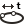
<style>
.page{position:relative;width:24px;height:24px;background:#ffffff}
.page>*{position:absolute;margin:0}
.t1{font:10px "ArialMT";color:#000000;scale:1.26 1}
</style>
<div class="page">
<p class="t1" style="left:16px;top:2px;width:5px;height:7px">t</p>
</div>
